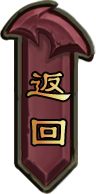
<style>
.page{position:relative;width:96px;height:194px;background:#ffffff}
.page>*{position:absolute;margin:0}
.t1{font:45.7px "LiSu"}
</style>
<div class="page">
<p class="t1" style="left:27px;top:73px;width:44px;height:73px">返回</p>
</div>
